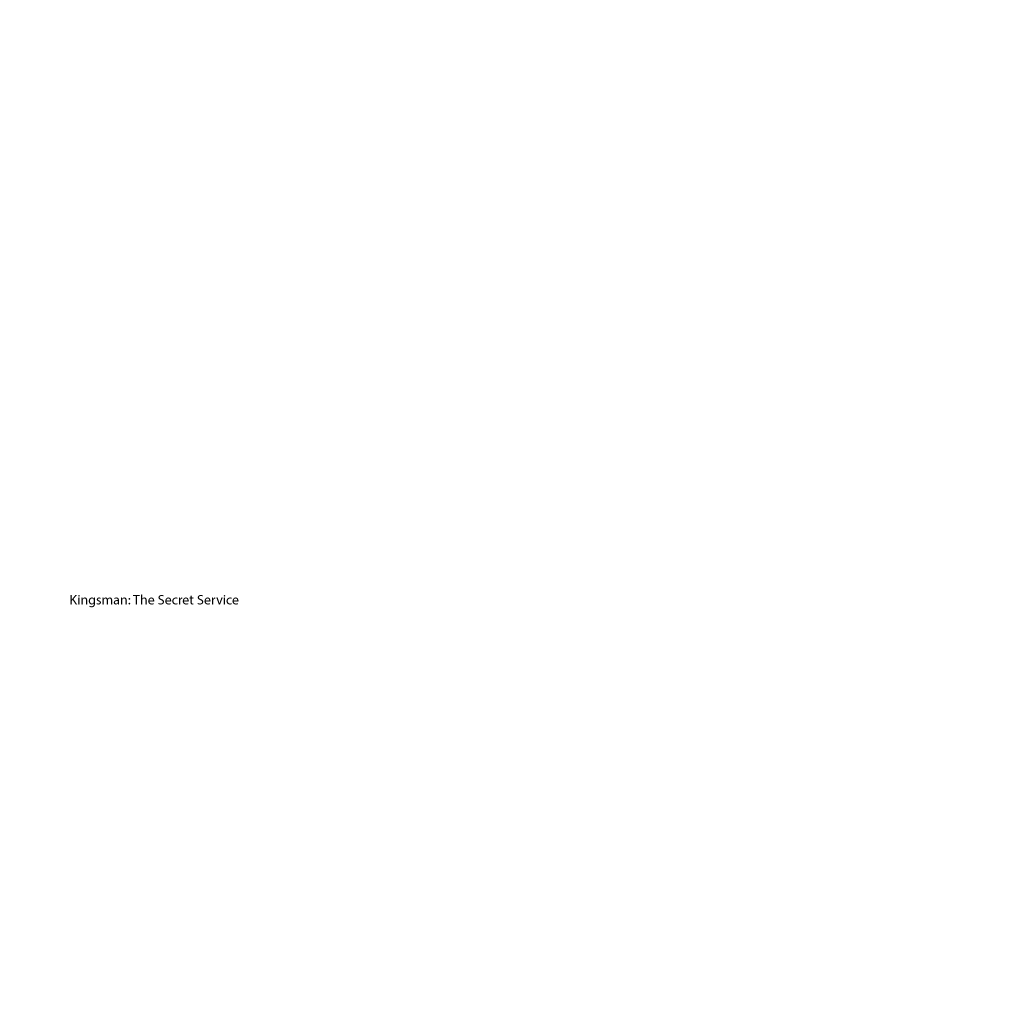
<style>
.page{position:relative;width:1020px;height:1020px;background:#ffffff}
.page>*{position:absolute;margin:0}
.t1{font:14px "MyriadPro-Regular";color:#000000}
</style>
<div class="page">
<p class="t1" style="left:70px;top:594px;width:169px;height:14px">Kingsman: The Secret Service</p>
</div>
